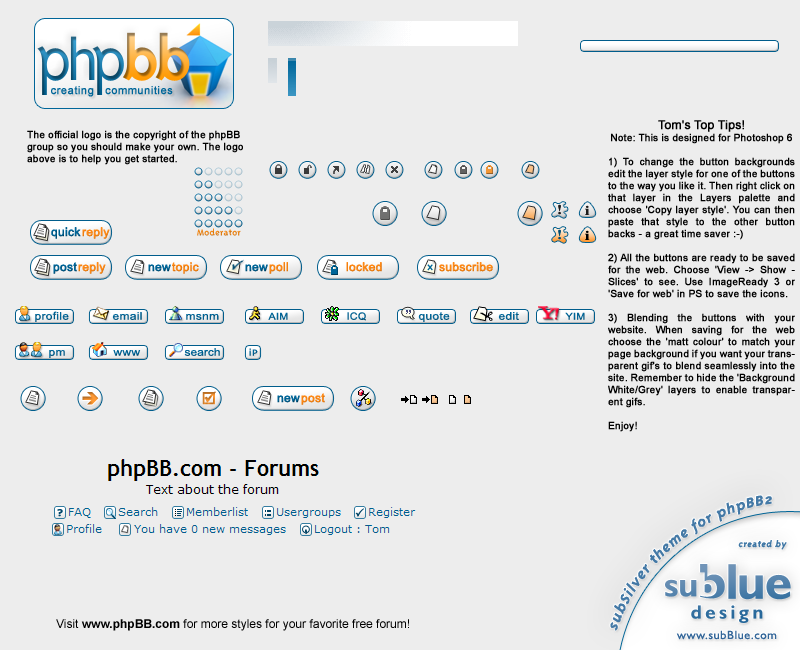
<style>
.page{position:relative;width:800px;height:650px;background:#ededed}
.page>*{position:absolute;margin:0}
.t1{font:11px "ArialMT";letter-spacing:0.025em;color:#006699;font-weight:bold}
.t2{font:10px "ArialMT";color:#000000;font-weight:bold}
.t3{font:12px "ArialMT";color:#000000;font-weight:bold}
.t4{font:13.5px "TimesNewRomanPS-BoldMT";color:#1c1c1c;scale:1.22 1}
.t5{font:12px "ArialMT";color:#005f8f;font-weight:bold}
.t6{font:12px "ArialMT";color:#ff9900;font-weight:bold}
.t7{font:10px "TriplexBold";letter-spacing:0.025em;color:#f38918}
.t8{font:13.5px "TimesNewRomanPS-BoldMT";color:#004d73;scale:1.22 1}
.t9{font:13.5px "TimesNewRomanPS-BoldMT";color:#000000;scale:1.22 1}
.t10{font:12px "ArialMT";color:#006394;font-weight:bold}
.t11{font:12px "ArialMT";color:#ff8813;font-weight:bold}
.t12{font:12px "ArialMT";color:#f18112;font-weight:bold}
.t13{font:12px "ArialMT";color:#fc8613;font-weight:bold}
.t14{font:10.8px "ArialMT";letter-spacing:0.025em;color:#006699;scale:1.11 1}
.t15{font:10.2px "ArialMT";letter-spacing:0.025em;color:#006699;scale:1.18 1}
.t16{font:10.8px "ArialMT";letter-spacing:0.025em;color:#006091;scale:1.11 1}
.t17{font:9.6px "ArialMT";letter-spacing:0.025em;color:#006699;scale:1.12 1}
.t18{font:10.2px "ArialMT";letter-spacing:0.025em;color:#006292;scale:1.06 1}
.t19{font:10.8px "ArialMT";letter-spacing:0.025em;color:#006191;scale:1.11 1}
.t20{font:10.8px "ArialMT";color:#006699;scale:1.11 1}
.t21{font:12px "ArialMT";color:#000000}
.t22{font:12px "Arial-BoldMT";color:#000000}
</style>
<div class="page">
<p class="t1" style="left:51px;top:86px;width:122px;height:11px">creating   communities</p>
<p class="t2" style="left:608px;top:120px;width:187px;height:312px;text-align:justify"><span class="t3">Tom's Top Tips!<br></span>Note: This is designed for Photoshop 6<br><br>1) To change the button backgrounds edit the layer style for one of the buttons to the way you like it. Then right click on that layer in the Layers palette and choose 'Copy layer style'. You can then paste that style to the other button backs - a great time saver :-)<br><br>2) All the buttons are ready to be saved for the web. Choose 'View -&gt; Show - Slices' to see. Use ImageReady 3 or 'Save for web' in PS to save the icons.<br><br>3) Blending the buttons with your website. When saving for the web choose the 'matt colour' to match your page background if you want your transparent gif's to blend seamlessly into the site. Remember to hide the 'Background White/Grey' layers to enable transparent gifs.<br><br>Enjoy!</p>
<p class="t2" style="left:27px;top:130px;width:216px;height:35px">The official logo is the copyright of the phpBB <br>group so you should make your own. The logo<br>above is to help you get started.</p>
<p class="t4" style="left:558px;top:204px;width:3px;height:11px">!</p>
<p class="t4" style="left:585px;top:205px;width:5px;height:10px">i</p>
<p class="t5" style="left:51px;top:227px;width:30px;height:12px">quick</p>
<p class="t6" style="left:82px;top:227px;width:28px;height:12px">reply</p>
<p class="t7" style="left:197px;top:228px;width:44px;height:8px">Moderator</p>
<p class="t8" style="left:558px;top:229px;width:3px;height:11px">!</p>
<p class="t9" style="left:585px;top:230px;width:5px;height:10px">i</p>
<p class="t10" style="left:53px;top:262px;width:24px;height:12px">post</p>
<p class="t6" style="left:78px;top:262px;width:28px;height:12px">reply</p>
<p class="t5" style="left:148px;top:264px;width:23px;height:8px">new</p>
<p class="t11" style="left:172px;top:262px;width:27px;height:12px">topic</p>
<p class="t5" style="left:245px;top:264px;width:23px;height:8px">new</p>
<p class="t12" style="left:269px;top:262px;width:19px;height:12px">poll</p>
<p class="t13" style="left:346px;top:262px;width:36px;height:10px">locked</p>
<p class="t6" style="left:439px;top:262px;width:54px;height:10px">subscribe</p>
<p class="t14" style="left:35px;top:311px;width:34px;height:11px">pro<span class="t15">f</span>ile</p>
<p class="t14" style="left:112px;top:312px;width:30px;height:8px">email</p>
<p class="t16" style="left:186px;top:314px;width:33px;height:6px">msnm</p>
<p class="t17" style="left:268px;top:312px;width:20px;height:8px">AIM</p>
<p class="t18" style="left:347px;top:312px;width:19px;height:9px">ICQ</p>
<p class="t14" style="left:418px;top:312px;width:32px;height:10px">quote</p>
<p class="t14" style="left:498px;top:312px;width:21px;height:8px">edit</p>
<p class="t17" style="left:565px;top:312px;width:20px;height:8px">YIM</p>
<p class="t14" style="left:49px;top:350px;width:16px;height:8px">pm</p>
<p class="t19" style="left:113px;top:350px;width:28px;height:6px">www</p>
<p class="t20" style="left:184px;top:348px;width:36px;height:8px">search</p>
<p class="t5" style="left:277px;top:395px;width:23px;height:8px">new</p>
<p class="t6" style="left:301px;top:393px;width:24px;height:12px">post</p>
<p class="t21" style="left:56px;top:619px;width:353px;height:12px">Visit <span class="t22">www.phpBB.com</span> for more styles for your favorite free forum!</p>
</div>
